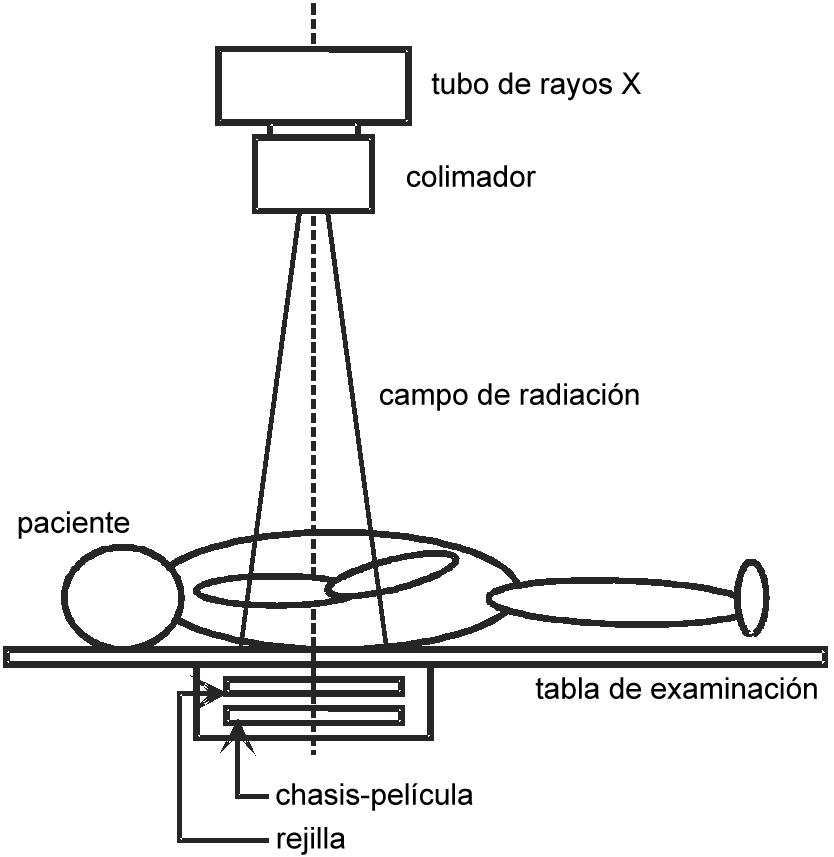
<style>
.page{position:relative;width:834px;height:857px;background:#ffffff}
.page>*{position:absolute;margin:0}
.t1{font:30px "ArialMT";color:#000000}
</style>
<div class="page">
<p class="t1" style="left:431px;top:72px;width:210px;height:29px">tubo de rayos X</p>
<p class="t1" style="left:407px;top:165px;width:129px;height:22px">colimador</p>
<p class="t1" style="left:380px;top:383px;width:259px;height:28px">campo de radiación</p>
<p class="t1" style="left:18px;top:511px;width:112px;height:28px">paciente</p>
<p class="t1" style="left:535px;top:677px;width:282px;height:22px">tabla de examinación</p>
<p class="t1" style="left:276px;top:783px;width:197px;height:28px">chasis-película</p>
<p class="t1" style="left:277px;top:827px;width:68px;height:28px">rejilla</p>
</div>
